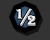
<style>
.page{position:relative;width:50px;height:40px;background:#333333}
.page>*{position:absolute;margin:0}
.t1{font:24.7px "Algerian";color:#ffffff}
</style>
<div class="page">
<p class="t1" style="left:16px;top:8px;width:20px;height:18px">½</p>
</div>
